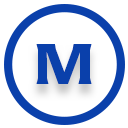
<style>
.page{position:relative;width:128px;height:128px;background:#ffffff}
.page>*{position:absolute;margin:0}
.t1{font:59.8px "Arpona-SemiBold";color:#0a40ab;scale:1.17 1}
</style>
<div class="page">
<p class="t1" style="left:36px;top:44px;width:56px;height:40px">M</p>
</div>
